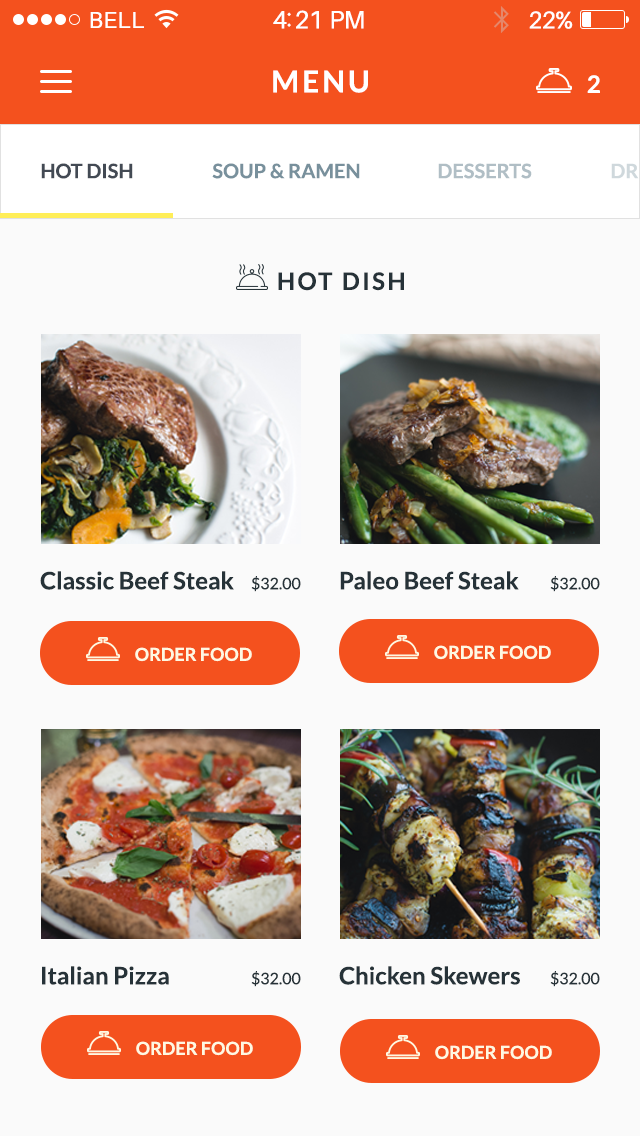
<style>
.page{position:relative;width:640px;height:1136px;background:#fafafa}
.page>*{position:absolute;margin:0}
.t1{font:23px "Aileron-Regular";letter-spacing:0.02em;color:#ffffff}
.t2{font:25px "Aileron-Regular";letter-spacing:-0.02em;color:#ffffff}
.t3{font:24px "Aileron-Regular";letter-spacing:-0.02em;color:#ffffff}
.t4{font:30px "Lato-Bold";letter-spacing:0.1em;color:#ffffff;text-transform:uppercase}
.t5{font:24px "Lato-Bold";letter-spacing:0.1em;color:#ffffff;text-transform:uppercase}
.t6{font:20px "Lato-Bold";color:#434a54;text-transform:uppercase}
.t7{font:20px "Lato-Bold";color:#78909c;text-transform:uppercase}
.t8{font:20px "Lato-Bold";color:#b0bec5;text-transform:uppercase}
.t9{font:24px "Lato-Bold";letter-spacing:0.1em;color:#263238;text-transform:uppercase}
.t10{font:24px "Lato-Bold";color:#263238}
.t11{font:16px/30px "Lato-Regular";color:#263238}
.t12{font:18px "Lato-Bold";color:#fef8e2;text-transform:uppercase}
</style>
<div class="page">
<p class="t1" style="left:90px;top:12px;width:54px;height:16px">BELL</p>
<p class="t2" style="left:273px;top:10px;width:91px;height:19px">4:21 PM</p>
<p class="t3" style="left:529px;top:11px;width:44px;height:18px">22%</p>
<p class="t4" style="left:273px;top:70px;width:95px;height:23px">menu</p>
<p class="t5" style="left:587px;top:75px;width:13px;height:18px">2</p>
<p class="t6" style="left:41px;top:163px;width:92px;height:16px">Hot Dish</p>
<p class="t7" style="left:212px;top:163px;width:148px;height:16px">Soup &amp; ramen</p>
<p class="t8" style="left:438px;top:163px;width:94px;height:16px">Desserts</p>
<p class="t9" style="left:278px;top:272px;width:126px;height:19px">Hot Dish</p>
<p class="t10" style="left:40px;top:571px;width:194px;height:19px">Classic Beef Steak</p>
<p class="t11" style="left:251px;top:576px;width:50px;height:16px">$32.00<br>00</p>
<p class="t10" style="left:340px;top:571px;width:179px;height:19px">Paleo Beef Steak</p>
<p class="t11" style="left:550px;top:576px;width:50px;height:16px">$32.00<br>00</p>
<p class="t12" style="left:135px;top:647px;width:117px;height:15px">Order food</p>
<p class="t12" style="left:434px;top:645px;width:117px;height:15px">Order food</p>
<p class="t10" style="left:42px;top:966px;width:127px;height:19px">Italian Pizza</p>
<p class="t10" style="left:339px;top:966px;width:181px;height:19px">Chicken Skewers</p>
<p class="t11" style="left:251px;top:971px;width:50px;height:16px">$32.00<br>00</p>
<p class="t11" style="left:550px;top:971px;width:50px;height:16px">$32.00<br>00</p>
<p class="t12" style="left:136px;top:1041px;width:117px;height:15px">Order food</p>
<p class="t12" style="left:435px;top:1045px;width:117px;height:15px">Order food</p>
</div>
